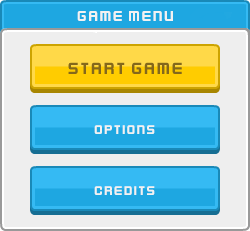
<style>
.page{position:relative;width:250px;height:231px;background:#eeeeee}
.page>*{position:absolute;margin:0}
.t1{font:16px "KenVector-Future-Thin";color:#f2f2f2}
.t2{font:18px "KenVector-Future-Thin";color:#85691c}
.t3{font:14px "KenVector-Future-Thin";color:#f2f2f2}
</style>
<div class="page">
<p class="t1" style="left:77px;top:11px;width:96px;height:10px">GAME MENU</p>
<p class="t2" style="left:68px;top:62px;width:114px;height:12px">START GAME</p>
<p class="t3" style="left:94px;top:125px;width:61px;height:9px">OPTIONS</p>
<p class="t3" style="left:94px;top:186px;width:61px;height:9px">CREDITS</p>
</div>
